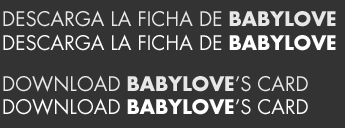
<style>
.page{position:relative;width:345px;height:128px;background:#333333}
.page>*{position:absolute;margin:0}
.t1{font:19.6px "FuturaStd-Book";color:#ffffff}
.t2{font:19.6px "FuturaStd-Bold";color:#ffffff}
</style>
<div class="page">
<p class="t1" style="left:3px;top:10px;width:333px;height:17px;opacity:0.88">DESCARGA LA FICHA DE <span class="t2">BABYLOVE</span></p>
<p class="t1" style="left:3px;top:34px;width:333px;height:17px">DESCARGA LA FICHA DE <span class="t2">BABYLOVE</span></p>
<p class="t1" style="left:3px;top:75px;width:305px;height:17px;opacity:0.88">DOWNLOAD <span class="t2">BABYLOVE</span>’S CARD</p>
<p class="t1" style="left:3px;top:98px;width:305px;height:17px">DOWNLOAD <span class="t2">BABYLOVE</span>’S CARD</p>
</div>
